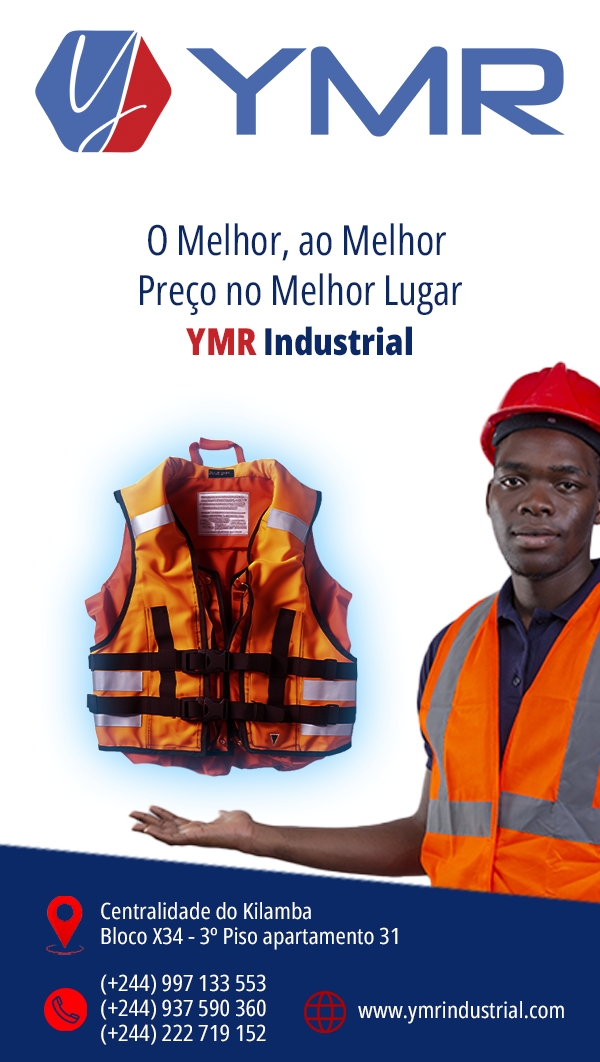
<style>
.page{position:relative;width:600px;height:1062px;background:#ffffff}
.page>*{position:absolute;margin:0}
.t1{font:41.7px/50px "OpenSansRoman-CondensedRegular";color:#0a2966}
.t2{font:37.5px/50px "OpenSansRoman-CondensedExtraBold";color:#c32329}
.t3{font:37.5px/50px "OpenSansRoman-CondensedExtraBold";color:#0a2966}
.t4{font:22.5px/25px "OpenSansRoman-CondensedRegular";color:#ffffff;scale:1.11 1}
.t5{font:22.5px "OpenSansRoman-CondensedRegular";color:#ffffff;scale:1.11 1}
</style>
<div class="page">
<p class="t1" style="left:140px;top:223px;width:322px;height:133px;text-align:center">O Melhor, ao Melhor <br>Preço no Melhor Lugar<br><span class="t2">YMR</span><span class="t3"> Industrial</span></p>
<p class="t4" style="left:101px;top:902px;width:297px;height:48px">Centralidade do Kilamba<br>Bloco X34 - 3º Piso apartamento 31</p>
<p class="t4" style="left:101px;top:974px;width:165px;height:71px">(+244) 997 133 553<br>(+244) 937 590 360<br>(+244) 222 719 152</p>
<p class="t5" style="left:358px;top:1001px;width:206px;height:23px">www.ymrindustrial.com</p>
</div>
